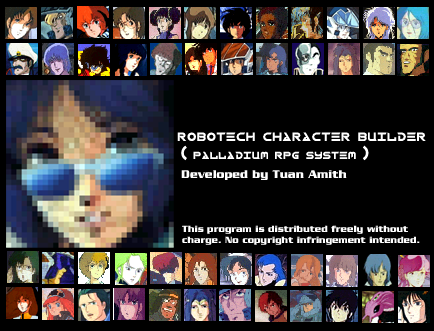
<style>
.page{position:relative;width:434px;height:331px;background:#000000}
.page>*{position:absolute;margin:0}
.t1{font:14px "Robotech-Complete-Regular";color:#ffffff}
.t2{font:12px "Robotech-Complete-Regular";color:#ffffff}
.t3{font:11px "JuliusBlack";color:#ffffff}
.t4{font:9px "JuliusBlack";color:#ffffff}
</style>
<div class="page">
<p class="t1" style="left:177px;top:132px;width:249px;height:9px">robotech character builder</p>
<p class="t2" style="left:181px;top:145px;width:188px;height:16px">( palladium rpg system )</p>
<p class="t3" style="left:181px;top:170px;width:166px;height:10px">Developed by Tuan Amith</p>
<p class="t4" style="left:182px;top:225px;width:238px;height:20px">This program is distributed freely without<br>charge. No copyright infringement intended.</p>
</div>
